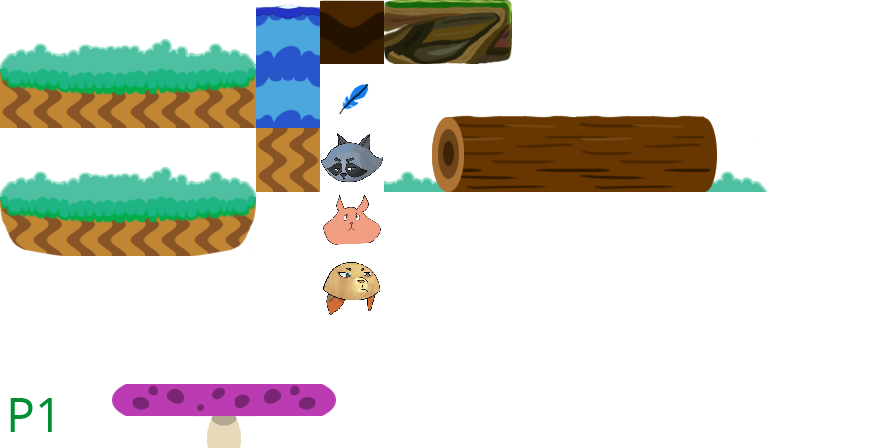
<style>
.page{position:relative;width:896px;height:448px;background:#ffffff}
.page>*{position:absolute;margin:0}
.t1{font:48px "OpenSans-Regular";color:#008f32}
</style>
<div class="page">
<p class="t1" style="left:10px;top:398px;width:42px;height:34px">P1</p>
</div>
